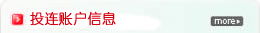
<style>
.page{position:relative;width:260px;height:33px}
.page>*{position:absolute;margin:0}
.t1{font:14px "YouYuan";color:#d7000f;font-weight:bold}
</style>
<div class="page">
<p class="t1" style="left:30px;top:11px;width:86px;height:15px">投连账户信息</p>
</div>
